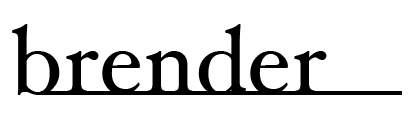
<style>
.page{position:relative;width:418px;height:114px;background:#ffffff}
.page>*{position:absolute;margin:0}
.t1{font:95.1px "HoeflerText-Regular";color:#000000}
</style>
<div class="page">
<p class="t1" style="left:12px;top:24px;width:315px;height:71px">brender</p>
</div>
